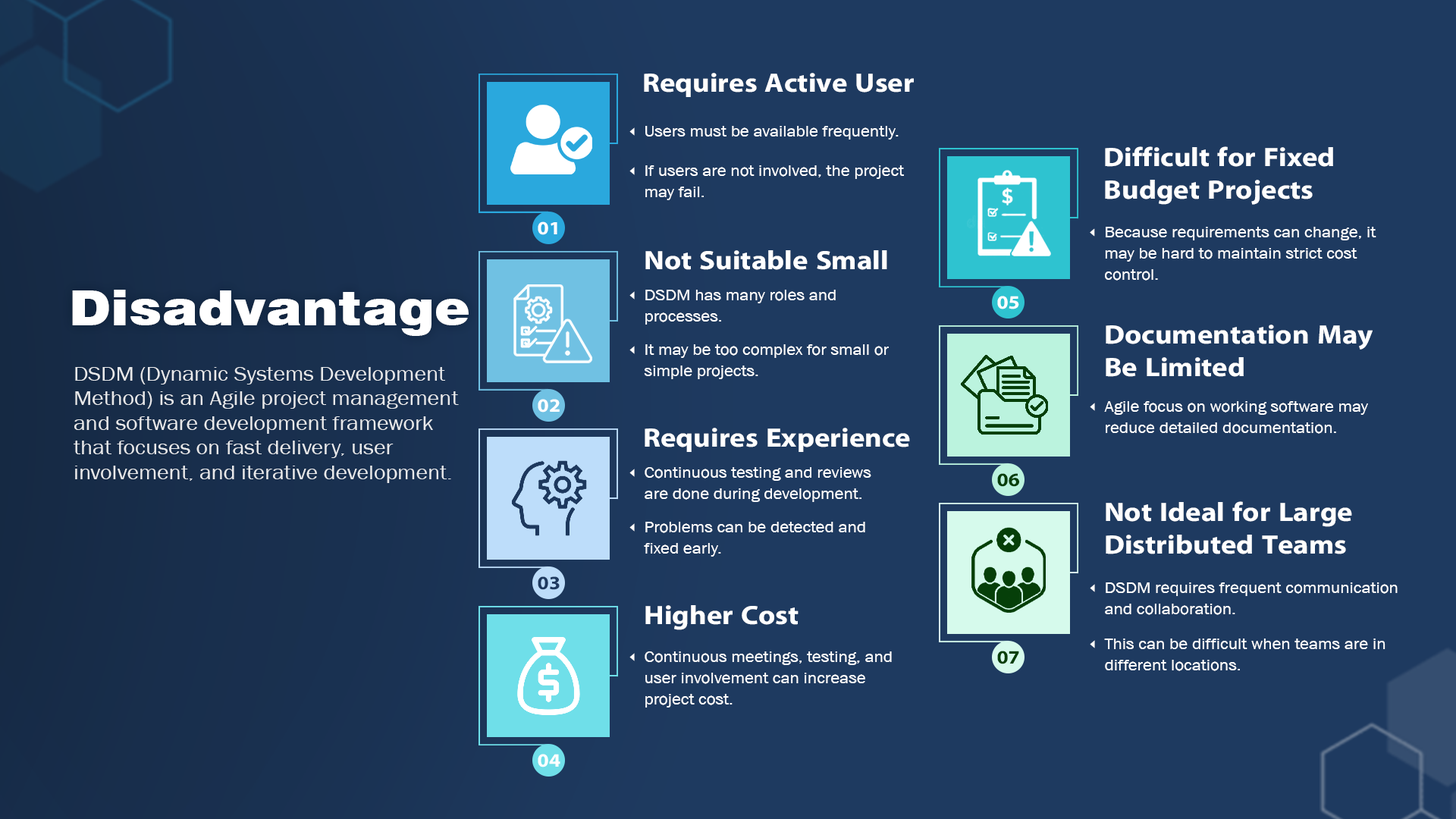
<style>
.page{position:relative;width:1456px;height:819px;background:#1e3a60}
.page>*{position:absolute;margin:0}
.t1{font:26.7px "iKampuchea001_O'Chrov";color:#ffffff;scale:1.1 1}
.t2{font:15.6px "AA-Khmer-AngDaunPov";color:#ffffff;scale:1.1 1}
.t3{font:26.8px "iKampuchea001_O'Chrov";color:#ffffff;scale:1.1 1}
.t4{font:15.6px/21.2px "AA-Khmer-AngDaunPov";color:#ffffff;scale:1.1 1}
.t5{font:18.9px "iKampuchea001_O'Chrov";color:#ffffff;scale:1.1 1}
.t6{font:15.7px/21.3px "AA-Khmer-AngDaunPov";color:#ffffff;scale:1.1 1}
.t7{font:48.5px "Swiss721BT-Black";color:#ffffff;scale:1.1 1}
.t8{font:20.5px "AA-Khmer-AngDaunPov";color:#ffffff;scale:1.1 1}
.t9{font:18.9px "iKampuchea001_O'Chrov";color:#063f09;scale:1.1 1}
.t10{font:18.9px "iKampuchea001_O'Chrov";color:#1e3a60;scale:1.1 1}
</style>
<div class="page">
<p class="t1" style="left:644px;top:73px;width:270px;height:24px">Requires Active User</p>
<p class="t2" style="left:645px;top:126px;width:254px;height:14px">Users must be available frequently.</p>
<p class="t3" style="left:1105px;top:146px;width:228px;height:59px">Difficult for Fixed <br>Budget Projects</p>
<p class="t4" style="left:645px;top:165px;width:259px;height:35px">If users are not involved, the project <br>may fail.</p>
<p class="t5" style="left:538px;top:221px;width:19px;height:14px">01</p>
<p class="t6" style="left:1105px;top:227px;width:271px;height:54px">Because requirements can change, it <br>may be hard to maintain strict cost <br>control.</p>
<p class="t3" style="left:645px;top:250px;width:242px;height:20px">Not Suitable Small</p>
<p class="t7" style="left:72px;top:290px;width:397px;height:46px">Disadvantage</p>
<p class="t6" style="left:645px;top:290px;width:191px;height:35px">DSDM has many roles and <br>processes.</p>
<p class="t5" style="left:997px;top:296px;width:22px;height:13px">05</p>
<p class="t3" style="left:1106px;top:325px;width:267px;height:52px">Documentation May <br>Be Limited</p>
<p class="t6" style="left:644px;top:344px;width:245px;height:35px">It may be too complex for small or <br>simple projects.</p>
<p class="t8" style="left:74px;top:367px;width:385px;height:116px;opacity:0.86">DSDM (Dynamic Systems Development <br>Method) is an Agile project management <br>and software development framework <br>that focuses on fast delivery, user <br>involvement, and iterative development.</p>
<p class="t5" style="left:538px;top:399px;width:22px;height:14px">02</p>
<p class="t6" style="left:1104px;top:401px;width:264px;height:33px">Agile focus on working software may <br>reduce detailed documentation.</p>
<p class="t3" style="left:645px;top:428px;width:265px;height:24px">Requires Experience</p>
<p class="t6" style="left:645px;top:467px;width:226px;height:35px">Continuous testing and reviews <br>are done during development.</p>
<p class="t9" style="left:997px;top:473px;width:22px;height:14px">06</p>
<p class="t3" style="left:1106px;top:501px;width:246px;height:53px">Not Ideal for Large <br>Distributed Teams</p>
<p class="t6" style="left:644px;top:522px;width:221px;height:35px">Problems can be detected and <br>fixed early.</p>
<p class="t10" style="left:538px;top:576px;width:22px;height:14px">03</p>
<p class="t6" style="left:1105px;top:582px;width:293px;height:33px">DSDM requires frequent communication <br>and collaboration.</p>
<p class="t3" style="left:645px;top:605px;width:154px;height:25px">Higher Cost</p>
<p class="t6" style="left:1104px;top:639px;width:281px;height:32px">This can be difficult when teams are in <br>different locations.</p>
<p class="t6" style="left:645px;top:651px;width:247px;height:57px">Continuous meetings, testing, and <br>user involvement can increase <br>project cost.</p>
<p class="t9" style="left:997px;top:651px;width:22px;height:13px">07</p>
<p class="t5" style="left:538px;top:754px;width:22px;height:13px">04</p>
</div>
